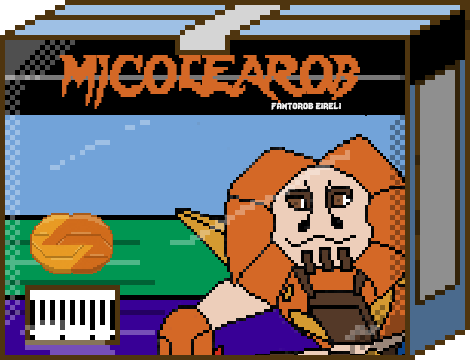
<style>
.page{position:relative;width:470px;height:360px}
.page>*{position:absolute;margin:0}
.t1{font:48px "Lady-Radical";color:#d46826;scale:0.72 1}
.t2{font:12px "Lady-Radical";color:#fbfbfb}
</style>
<div class="page">
<p class="t1" style="left:59px;top:55px;width:301px;height:54px">MICOLEAROB</p>
<p class="t2" style="left:271px;top:102px;width:70px;height:8px">fantorob eireli</p>
</div>
